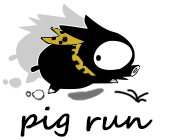
<style>
.page{position:relative;width:170px;height:140px;background:#ffffff}
.page>*{position:absolute;margin:0}
.t1{font:30px "SegoeScript";color:#000000;font-weight:bold}
</style>
<div class="page">
<p class="t1" style="left:20px;top:106px;width:133px;height:31px;rotate:1deg">pig run</p>
</div>
